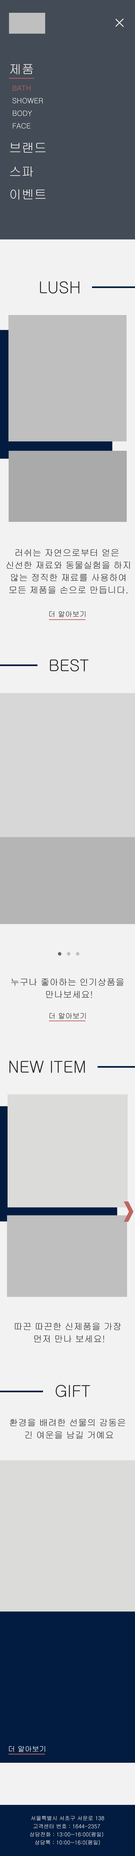
<style>
.page{position:relative;width:135px;height:1856px;background:#f2f2f2}
.page>*{position:absolute;margin:0}
.t1{font:12.6px "Gulim";color:#f5f2eb}
.t2{font:7.2px "Gulim";color:#bf665e}
.t3{font:7.2px "Gulim";color:#f5f2eb}
.t4{font:16.2px "Gulim";color:#262626}
.t5{font:9px/12.4px "Gulim";color:#262626}
.t6{font:7.2px "Gulim";color:#262626}
.t7{font:7.2px "Gulim";color:#ffffff}
.t8{font:5.4px/8.1px "Gulim";color:#ffffff}
</style>
<div class="page">
<p class="t1" style="left:10px;top:64px;width:23px;height:10px">제품</p>
<p class="t2" style="left:13px;top:85px;width:17px;height:6px">BATH</p>
<p class="t3" style="left:12px;top:98px;width:31px;height:6px">SHOWER</p>
<p class="t3" style="left:13px;top:111px;width:19px;height:5px">BODY</p>
<p class="t3" style="left:13px;top:123px;width:17px;height:6px">FACE</p>
<p class="t1" style="left:10px;top:143px;width:36px;height:10px">브랜드</p>
<p class="t1" style="left:10px;top:166px;width:23px;height:11px">스파</p>
<p class="t1" style="left:10px;top:189px;width:36px;height:11px">이벤트</p>
<p class="t4" style="left:40px;top:281px;width:39px;height:13px">LUSH</p>
<p class="t5" style="left:6px;top:549px;width:124px;height:45px;text-align:center">러쉬는 자연으로부터 얻은 <br>신선한 재료와 동물실험을 하지<br> 않는 정직한 재료를 사용하여 <br>모든 제품을 손으로 만듭니다.</p>
<p class="t6" style="left:49px;top:611px;width:37px;height:6px">더 알아보기</p>
<p class="t6" style="left:49px;top:611px;width:37px;height:6px">더 알아보기</p>
<p class="t4" style="left:50px;top:659px;width:39px;height:12px">BEST</p>
<p class="t5" style="left:11px;top:978px;width:113px;height:20px;text-align:center">누구나 좋아하는 인기상품을 <br>만나보세요!</p>
<p class="t6" style="left:50px;top:1013px;width:36px;height:6px">더 알아보기</p>
<p class="t6" style="left:50px;top:1013px;width:36px;height:6px">더 알아보기</p>
<p class="t4" style="left:9px;top:1061px;width:76px;height:12px">NEW ITEM</p>
<p class="t5" style="left:15px;top:1323px;width:106px;height:19px;text-align:center">따끈 따끈한 신제품을 가장 <br>먼저 만나 보세요!</p>
<p class="t4" style="left:56px;top:1385px;width:34px;height:12px">GIFT</p>
<p class="t5" style="left:10px;top:1419px;width:115px;height:20px;text-align:center">환경을 배려한 선물의 감동은<br> 긴 여운을 남길 거예요</p>
<p class="t7" style="left:9px;top:1746px;width:36px;height:6px">더 알아보기</p>
<p class="t7" style="left:9px;top:1746px;width:36px;height:6px">더 알아보기</p>
<p class="t8" style="left:30px;top:1816px;width:74px;height:29px;text-align:center">서울특별시 서초구 서운로 138<br>고객센터 번호 : 1644-2357 <br>상담전화 : 13:00~16:00(평일) <br>상담톡 : 10:00~16:0(평일)</p>
</div>
